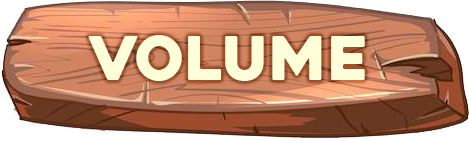
<style>
.page{position:relative;width:469px;height:141px}
.page>*{position:absolute;margin:0}
.t1{font:60px "Heavitas";color:#ffffda}
</style>
<div class="page">
<p class="t1" style="left:88px;top:35px;width:277px;height:46px">Volume</p>
</div>
